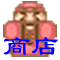
<style>
.page{position:relative;width:60px;height:60px;background:#ffffff}
.page>*{position:absolute;margin:0}
.t1{font:28px "LiSu";color:#0000ff}
</style>
<div class="page">
<p class="t1" style="left:3px;top:37px;width:55px;height:18px">商店</p>
</div>
